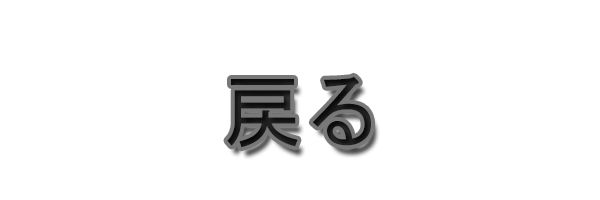
<style>
.page{position:relative;width:600px;height:200px;background:#ffffff}
.page>*{position:absolute;margin:0}
.t1{font:80px "MS-Gothic";color:#151515}
</style>
<div class="page">
<p class="t1" style="left:227px;top:76px;width:144px;height:72px">戻る</p>
</div>
